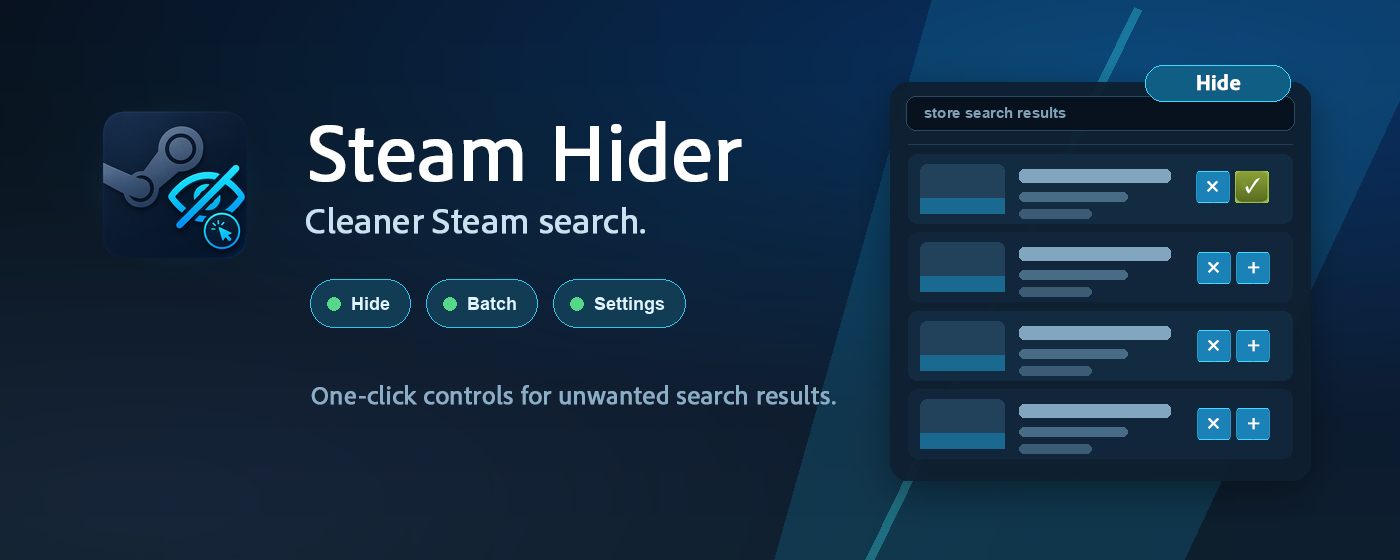
<style>
.page{position:relative;width:1400px;height:560px}
.page>*{position:absolute;margin:0}
.t1{font:21.8px "AdobeClean-Bold";color:#ffffff;font-weight:bold}
.t2{font:82px "AdobeClean-Regular";color:#ffffff;font-weight:bold}
.t3{font:22px "MinionPro-BoldCn";color:#ffffff;font-weight:bold}
.t4{font:36px "AdobeClean-Regular";color:#c9e2f2;font-weight:bold}
.t5{font:26px "AdobeClean-Regular";color:#8baec6;font-weight:bold}
</style>
<div class="page">
<p class="t1" style="left:1197px;top:74px;width:44px;height:17px">Hide</p>
<p class="t2" style="left:310px;top:121px;width:432px;height:61px">Steam Hider</p>
<p class="t3" style="left:1207px;top:181px;width:11px;height:11px">×</p>
<p class="t3" style="left:1245px;top:178px;width:15px;height:16px">✓</p>
<p class="t4" style="left:306px;top:207px;width:339px;height:27px">Cleaner Steam search.</p>
<p class="t3" style="left:1208px;top:262px;width:11px;height:11px">×</p>
<p class="t3" style="left:1248px;top:262px;width:12px;height:12px">+</p>
<p class="t3" style="left:1208px;top:340px;width:11px;height:11px">×</p>
<p class="t3" style="left:1248px;top:340px;width:12px;height:12px">+</p>
<p class="t5" style="left:311px;top:385px;width:525px;height:20px">One-click controls for unwanted search results.</p>
<p class="t3" style="left:1208px;top:418px;width:11px;height:11px">×</p>
<p class="t3" style="left:1248px;top:418px;width:12px;height:12px">+</p>
</div>
